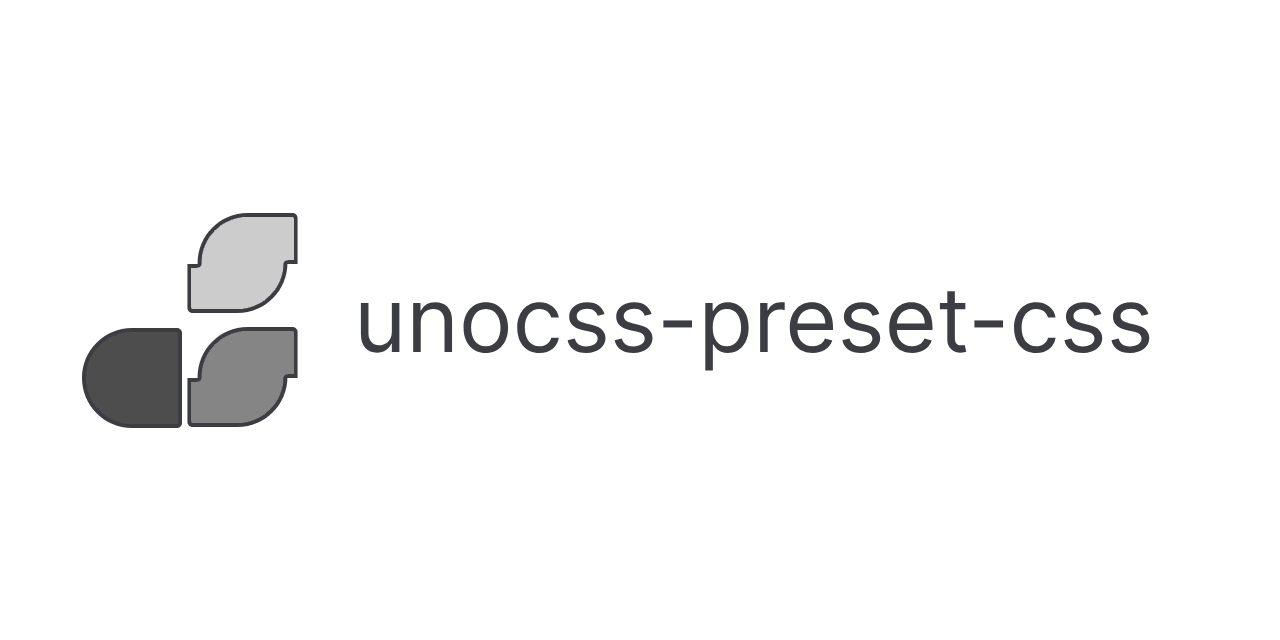
<style>
.page{position:relative;width:1280px;height:640px;background:#ffffff}
.page>*{position:absolute;margin:0}
.t1{font:90px "Inter-Regular";color:#3c3c43}
</style>
<div class="page">
<p class="t1" style="left:360px;top:291px;width:790px;height:80px">unocss-preset-css</p>
</div>
